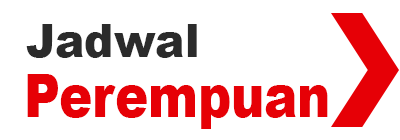
<style>
.page{position:relative;width:400px;height:140px;background:#ffffff}
.page>*{position:absolute;margin:0}
.t1{font:45.8px "Arial-Black";color:#2b2b2b;scale:0.97 1}
.t2{font:59.8px "Arial-Black";color:#e60006;scale:0.83 1}
</style>
<div class="page">
<p class="t1" style="left:26px;top:24px;width:171px;height:34px">Jadwal</p>
<p class="t2" style="left:27px;top:74px;width:301px;height:55px">Perempuan</p>
</div>
